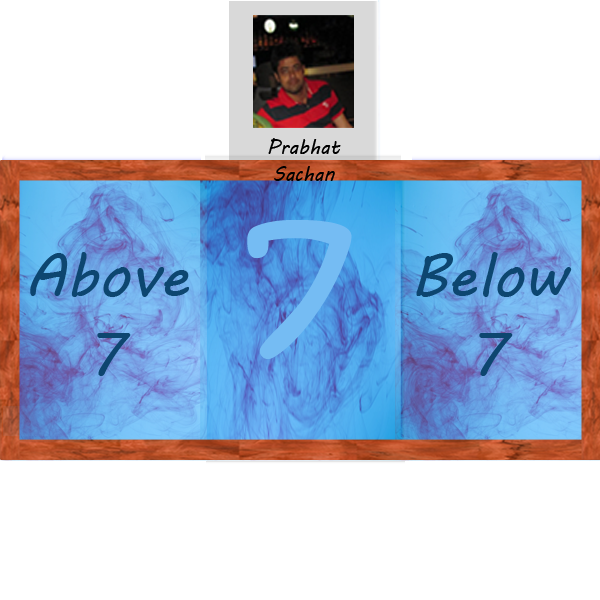
<style>
.page{position:relative;width:600px;height:600px;background:#ffffff}
.page>*{position:absolute;margin:0}
.t1{font:20px/26.8px "MVBoli";color:#000000}
.t2{font:200px "KristenITC-Regular";color:#75bcf3}
.t3{font:60px/26.8px "MVBoli";color:#0d4670}
</style>
<div class="page">
<p class="t1" style="left:268px;top:138px;width:73px;height:43px;text-align:center">Prabhat<br>Sachan</p>
<p class="t2" style="left:247px;top:219px;width:105px;height:140px">7</p>
<p class="t3" style="left:30px;top:252px;width:159px;height:124px;text-align:center">Above<br><br><br>7</p>
<p class="t3" style="left:416px;top:252px;width:156px;height:124px;text-align:center">Below<br><br><br>7</p>
</div>
